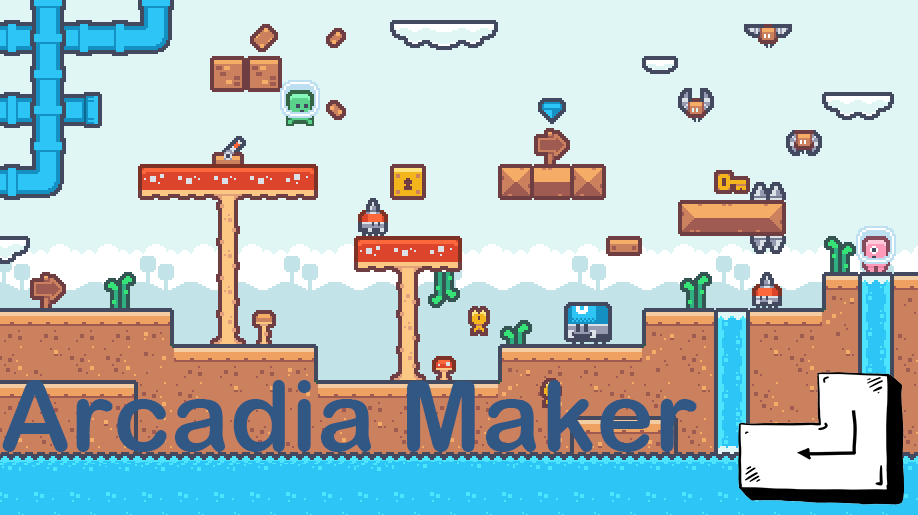
<style>
.page{position:relative;width:918px;height:515px;background:#dff6f5}
.page>*{position:absolute;margin:0}
.t1{font:97.9px "ArialRoundedMTBold";color:#315884}
</style>
<div class="page">
<p class="t1" style="left:2px;top:380px;width:695px;height:72px">Arcadia Maker</p>
</div>
